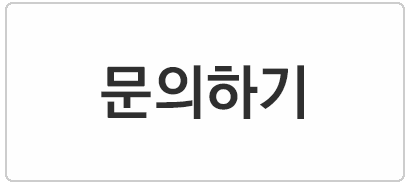
<style>
.page{position:relative;width:410px;height:185px;background:#fefefe}
.page>*{position:absolute;margin:0}
.t1{font:60px "KoPubDotumBold";color:#2f2f2f}
</style>
<div class="page">
<p class="t1" style="left:101px;top:65px;width:203px;height:54px">문의하기</p>
</div>
